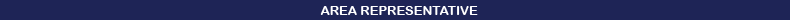
<style>
.page{position:relative;width:790px;height:20px;background:#1e2456}
.page>*{position:absolute;margin:0}
.t1{font:13px "ArialRoundedMTBold";color:#ffffff}
</style>
<div class="page">
<p class="t1" style="left:320px;top:6px;width:158px;height:9px">AREA REPRESENTATIVE</p>
</div>
